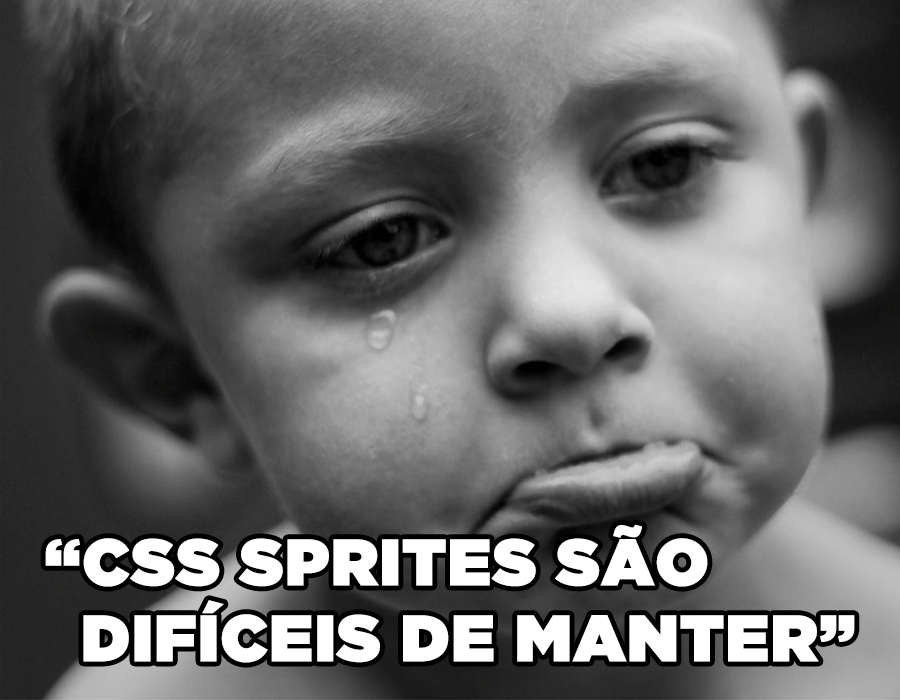
<style>
.page{position:relative;width:900px;height:700px}
.page>*{position:absolute;margin:0}
.t1{font:65.2px/75.9px "GothamUltra";color:#ffffff;font-weight:bold}
</style>
<div class="page">
<p class="t1" style="left:45px;top:524px;width:810px;height:139px">“CSS SPRITES SÃO<br>  DIFÍCEIS DE MANTER”</p>
</div>
